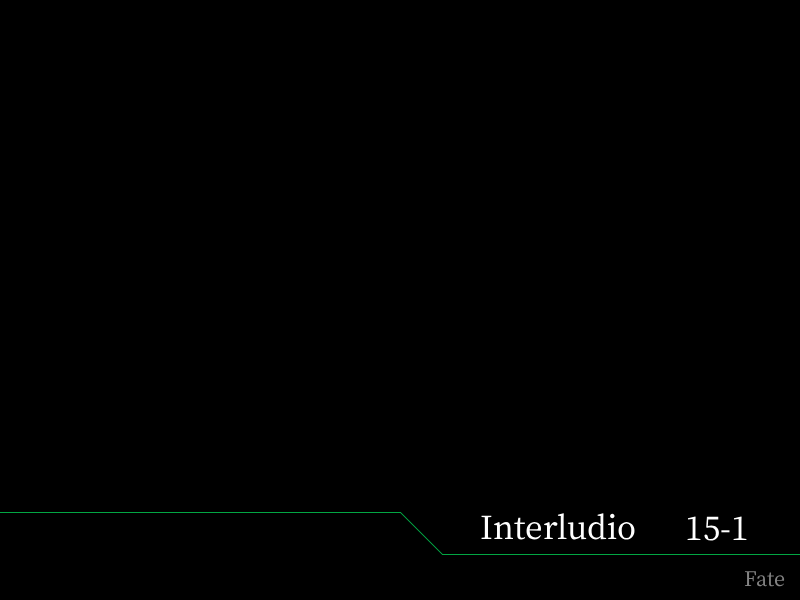
<style>
.page{position:relative;width:800px;height:600px;background:#000000}
.page>*{position:absolute;margin:0}
.t1{font:38px "OfficialFateFont-Medium";color:#ffffff}
.t2{font:24px "OfficialFateFont-Medium";color:#838383}
</style>
<div class="page">
<p class="t1" style="left:481px;top:513px;width:154px;height:27px">Interludio</p>
<p class="t1" style="left:687px;top:516px;width:60px;height:25px">15-1</p>
<p class="t2" style="left:744px;top:571px;width:41px;height:16px">Fate</p>
</div>
